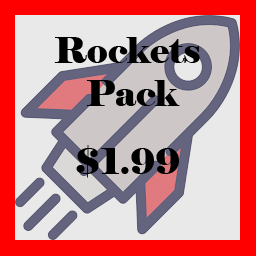
<style>
.page{position:relative;width:256px;height:256px;background:#e9e9e9}
.page>*{position:absolute;margin:0}
.t1{font:36px "Elephant-Regular";color:#000000}
</style>
<div class="page">
<p class="t1" style="left:54px;top:37px;width:146px;height:69px;text-align:center">Rockets <br>Pack</p>
<p class="t1" style="left:76px;top:145px;width:103px;height:33px">$1.99</p>
</div>
